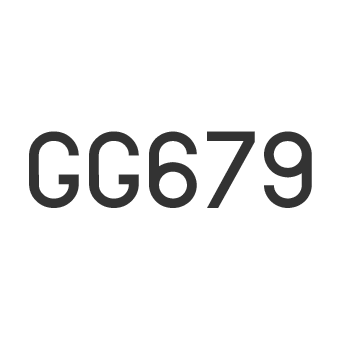
<style>
.page{position:relative;width:340px;height:340px;background:#ffffff}
.page>*{position:absolute;margin:0}
.t1{font:76.6px "RCN_8O_ATH";color:#333333;scale:1.04 1}
.t2{font:54px "RCN_8O_ATH";color:#333333;scale:1.04 1}
.t3{font:76.6px "RAF_PW_ATH";color:#333333;scale:1.04 1}
</style>
<div class="page">
<p class="t1" style="left:29px;top:131px;width:283px;height:77px"><span class="t2">ww</span><span class="t3">gg</span>679</p>
</div>
